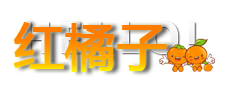
<style>
.page{position:relative;width:230px;height:90px;background:#ffffff}
.page>*{position:absolute;margin:0}
.t1{font:50px "MicrosoftYaHei";font-weight:bold}
</style>
<div class="page">
<p class="t1" style="left:14px;top:22px;width:153px;height:50px">红橘子</p>
</div>
